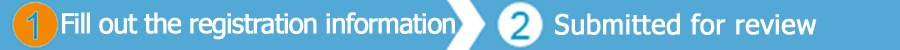
<style>
.page{position:relative;width:900px;height:50px;background:#52a9d5}
.page>*{position:absolute;margin:0}
.t1{font:27px "Tahoma";letter-spacing:-0.045em;color:#ffffff;font-weight:bold}
.t2{font:27px "Tahoma";color:#ffffff;font-weight:bold}
</style>
<div class="page">
<p class="t1" style="left:62px;top:12px;width:393px;height:28px">Fill out the registration information</p>
<p class="t2" style="left:555px;top:13px;width:262px;height:22px">Submitted for review</p>
</div>
